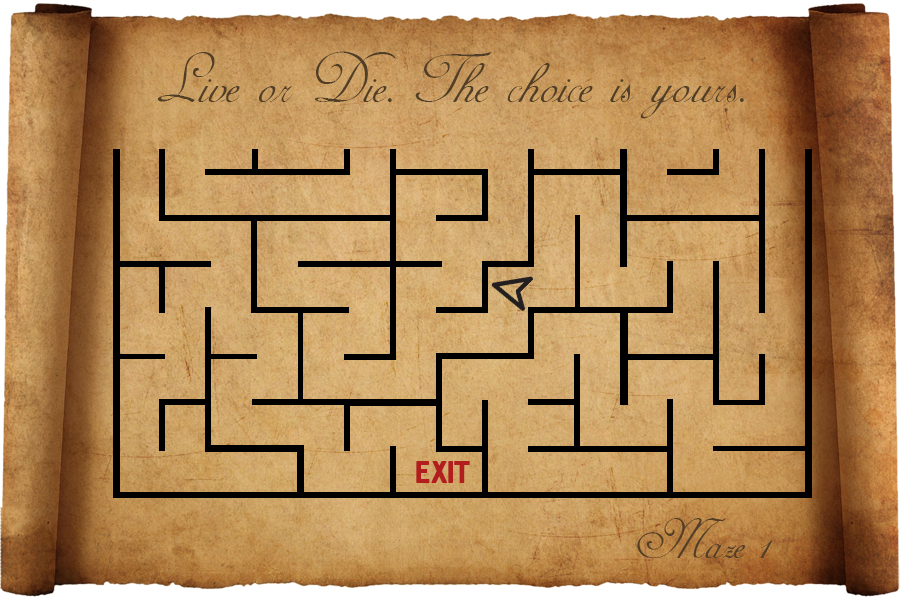
<style>
.page{position:relative;width:900px;height:600px}
.page>*{position:absolute;margin:0}
.t1{font:80px "AdineKirnberg-Script";color:#513e27}
.t2{font:32px "Hermes";color:#b21e1e}
.t3{font:64px "AdineKirnberg-Script";color:#513e27}
</style>
<div class="page">
<p class="t1" style="left:157px;top:51px;width:587px;height:68px">Live or Die. The choice is yours.</p>
<p class="t2" style="left:416px;top:461px;width:54px;height:22px">EXIT</p>
<p class="t3" style="left:637px;top:518px;width:136px;height:40px">Maze 1</p>
</div>
